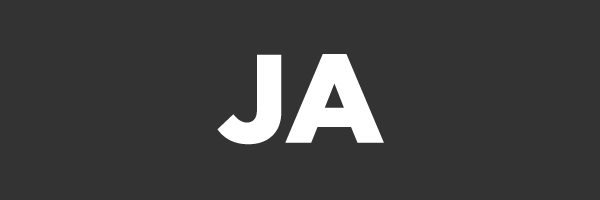
<style>
.page{position:relative;width:600px;height:200px;background:#333333}
.page>*{position:absolute;margin:0}
.t1{font:125.4px "Gotham-Black";color:#ffffff}
</style>
<div class="page">
<p class="t1" style="left:217px;top:54px;width:167px;height:91px">JA</p>
</div>
